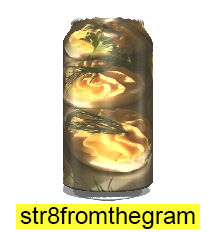
<style>
.page{position:relative;width:216px;height:232px;background:#ffffff}
.page>*{position:absolute;margin:0}
.t1{font:24px "ArialMT";color:#000000}
</style>
<div class="page">
<p class="t1" style="left:20px;top:206px;width:175px;height:23px">str8fromthegram</p>
</div>
